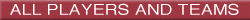
<style>
.page{position:relative;width:250px;height:20px}
.page>*{position:absolute;margin:0}
.t1{font:15px "Helvetica";color:#ffffff;scale:1.2 1}
</style>
<div class="page">
<p class="t1" style="left:10px;top:3px;width:229px;height:12px">ALL PLAYERS AND TEAMS</p>
</div>
